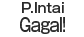
<style>
.page{position:relative;width:84px;height:37px;background:#ffffff}
.page>*{position:absolute;margin:0}
.t1{font:13px/14px "GothicMB101Pro-Medium";color:#2a2a2a}
.t2{font:18px/14px "GothicMB101Pro-Medium";letter-spacing:-0.04em;color:#2a2a2a;scale:0.8 1}
</style>
<div class="page">
<p class="t1" style="left:20px;top:2px;width:45px;height:32px;text-align:center">P.Intai<br><span class="t2">Gagal!</span></p>
</div>
